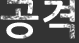
<style>
.page{position:relative;width:79px;height:43px;background:#333333}
.page>*{position:absolute;margin:0}
.t1{font:10.1px "NanumGothicBold"}
</style>
<div class="page">
<p class="t1" style="left:0px;top:0px;width:75px;height:39px;text-align:center">공격</p>
</div>
